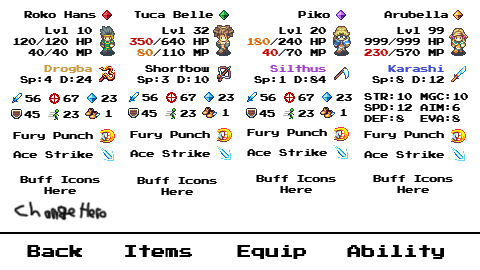
<style>
.page{position:relative;width:480px;height:270px;background:#ffffff}
.page>*{position:absolute;margin:0}
.t1{font:8px "PressStart2P-Regular";color:#000000}
.t2{font:8px/11px "PressStart2P-Regular";color:#000000}
.t3{font:8px/11px "PressStart2P-Regular";color:#c20505}
.t4{font:8px/11px "PressStart2P-Regular";color:#d76b01}
.t5{font:8px/11px "PressStart2P-Regular";color:#cc983e}
.t6{font:8px/11px "PressStart2P-Regular";color:#a23ecc}
.t7{font:8px/11px "PressStart2P-Regular";color:#3e4ccc}
.t8{font:14px "PressStart2P-Regular";color:#000000}
</style>
<div class="page">
<p class="t1" style="left:24px;top:11px;width:72px;height:7px">Roko Hans</p>
<p class="t1" style="left:134px;top:11px;width:79px;height:7px">Tuca Belle</p>
<p class="t1" style="left:298px;top:11px;width:32px;height:7px">Piko</p>
<p class="t1" style="left:384px;top:11px;width:64px;height:7px">Arubella</p>
<p class="t2" style="left:13px;top:27px;width:79px;height:29px;text-align:right">Lvl 10<br>120/120 HP<br>40/40 MP</p>
<p class="t2" style="left:129px;top:27px;width:80px;height:29px;text-align:right">Lvl 32<br><span class="t3">350</span>/640 HP<br><span class="t4">80</span>/110 MP</p>
<p class="t2" style="left:247px;top:27px;width:79px;height:29px;text-align:right">Lvl 20<br><span class="t4">180</span>/240 HP<br><span class="t3">40</span>/70 MP</p>
<p class="t2" style="left:364px;top:27px;width:80px;height:29px;text-align:right">Lvl 99<br>999/999 HP<br><span class="t3">230</span>/570 MP</p>
<p class="t2" style="left:20px;top:65px;width:72px;height:19px;text-align:right"><span class="t5">Drogba<br></span>Sp:4 D:24</p>
<p class="t2" style="left:137px;top:65px;width:72px;height:19px;text-align:right">Shortbow<br>Sp:3 D:10</p>
<p class="t2" style="left:254px;top:65px;width:72px;height:19px;text-align:right"><span class="t6">Silthus<br></span>Sp:1 D:84</p>
<p class="t2" style="left:372px;top:65px;width:72px;height:19px;text-align:right"><span class="t7">Karashi<br></span>Sp:8 D:12</p>
<p class="t1" style="left:25px;top:95px;width:16px;height:7px">56</p>
<p class="t1" style="left:63px;top:95px;width:16px;height:7px">67</p>
<p class="t1" style="left:101px;top:95px;width:16px;height:7px">23</p>
<p class="t1" style="left:142px;top:94px;width:16px;height:7px">56</p>
<p class="t1" style="left:180px;top:94px;width:16px;height:7px">67</p>
<p class="t1" style="left:218px;top:94px;width:16px;height:7px">23</p>
<p class="t1" style="left:260px;top:94px;width:16px;height:7px">56</p>
<p class="t1" style="left:298px;top:94px;width:16px;height:7px">67</p>
<p class="t1" style="left:336px;top:94px;width:16px;height:7px">23</p>
<p class="t2" style="left:364px;top:93px;width:104px;height:29px;text-align:right">STR:10 MGC:10<br>SPD:12 AIM:6 <br>DEF:8  EVA:8</p>
<p class="t1" style="left:24px;top:111px;width:16px;height:7px">45</p>
<p class="t1" style="left:63px;top:111px;width:16px;height:7px">23</p>
<p class="t1" style="left:105px;top:110px;width:7px;height:7px">1</p>
<p class="t1" style="left:141px;top:110px;width:16px;height:7px">45</p>
<p class="t1" style="left:180px;top:110px;width:16px;height:7px">23</p>
<p class="t1" style="left:222px;top:109px;width:7px;height:7px">1</p>
<p class="t1" style="left:259px;top:110px;width:16px;height:7px">45</p>
<p class="t1" style="left:298px;top:110px;width:16px;height:7px">23</p>
<p class="t1" style="left:340px;top:109px;width:7px;height:7px">1</p>
<p class="t1" style="left:13px;top:132px;width:80px;height:8px">Fury Punch</p>
<p class="t1" style="left:130px;top:131px;width:80px;height:8px">Fury Punch</p>
<p class="t1" style="left:247px;top:129px;width:80px;height:8px">Fury Punch</p>
<p class="t1" style="left:364px;top:131px;width:80px;height:8px">Fury Punch</p>
<p class="t1" style="left:130px;top:150px;width:80px;height:7px">Ace Strike</p>
<p class="t1" style="left:247px;top:149px;width:80px;height:7px">Ace Strike</p>
<p class="t1" style="left:13px;top:151px;width:80px;height:7px">Ace Strike</p>
<p class="t1" style="left:364px;top:151px;width:80px;height:7px">Ace Strike</p>
<p class="t2" style="left:20px;top:176px;width:80px;height:18px;text-align:center">Buff Icons<br>Here</p>
<p class="t2" style="left:137px;top:177px;width:80px;height:18px;text-align:center">Buff Icons<br>Here</p>
<p class="t2" style="left:256px;top:175px;width:80px;height:18px;text-align:center">Buff Icons<br>Here</p>
<p class="t2" style="left:373px;top:175px;width:80px;height:18px;text-align:center">Buff Icons<br>Here</p>
<p class="t8" style="left:27px;top:245px;width:55px;height:12px">Back</p>
<p class="t8" style="left:125px;top:245px;width:67px;height:12px">Items</p>
<p class="t8" style="left:237px;top:245px;width:69px;height:14px">Equip</p>
<p class="t8" style="left:347px;top:245px;width:97px;height:14px">Ability</p>
</div>
